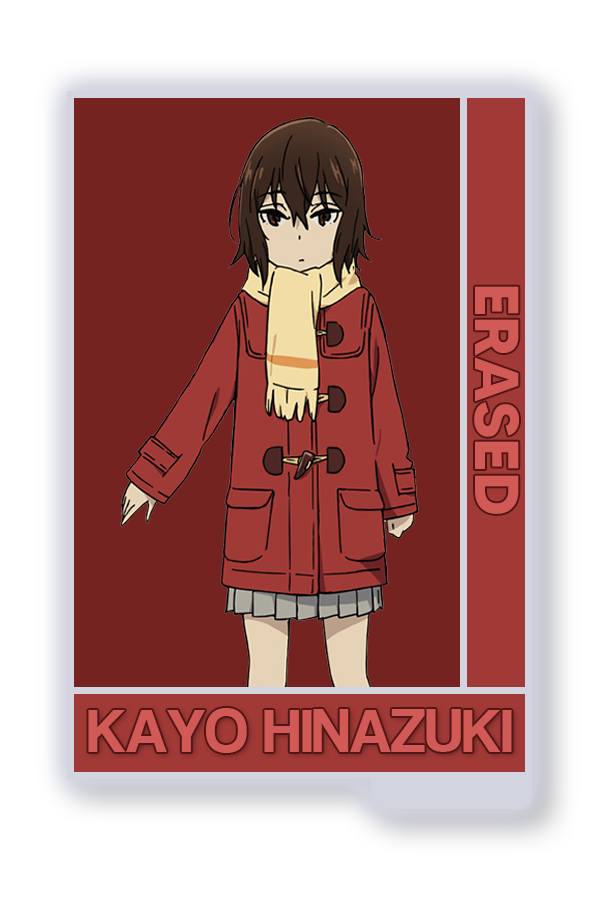
<style>
.page{position:relative;width:600px;height:900px;background:#742320}
.page>*{position:absolute;margin:0}
.t1{font:61.9px "MADETOMMY-Bold";color:#d15a56}
.t2{font:63.7px "CoolveticaRg-Regular";color:#d15a56}
</style>
<div class="page">
<p class="t1" style="left:474px;top:286px;width:45px;height:228px;rotate:90deg">ERASED</p>
<p class="t2" style="left:88px;top:708px;width:424px;height:45px">KAYO HINAZUKI</p>
</div>
